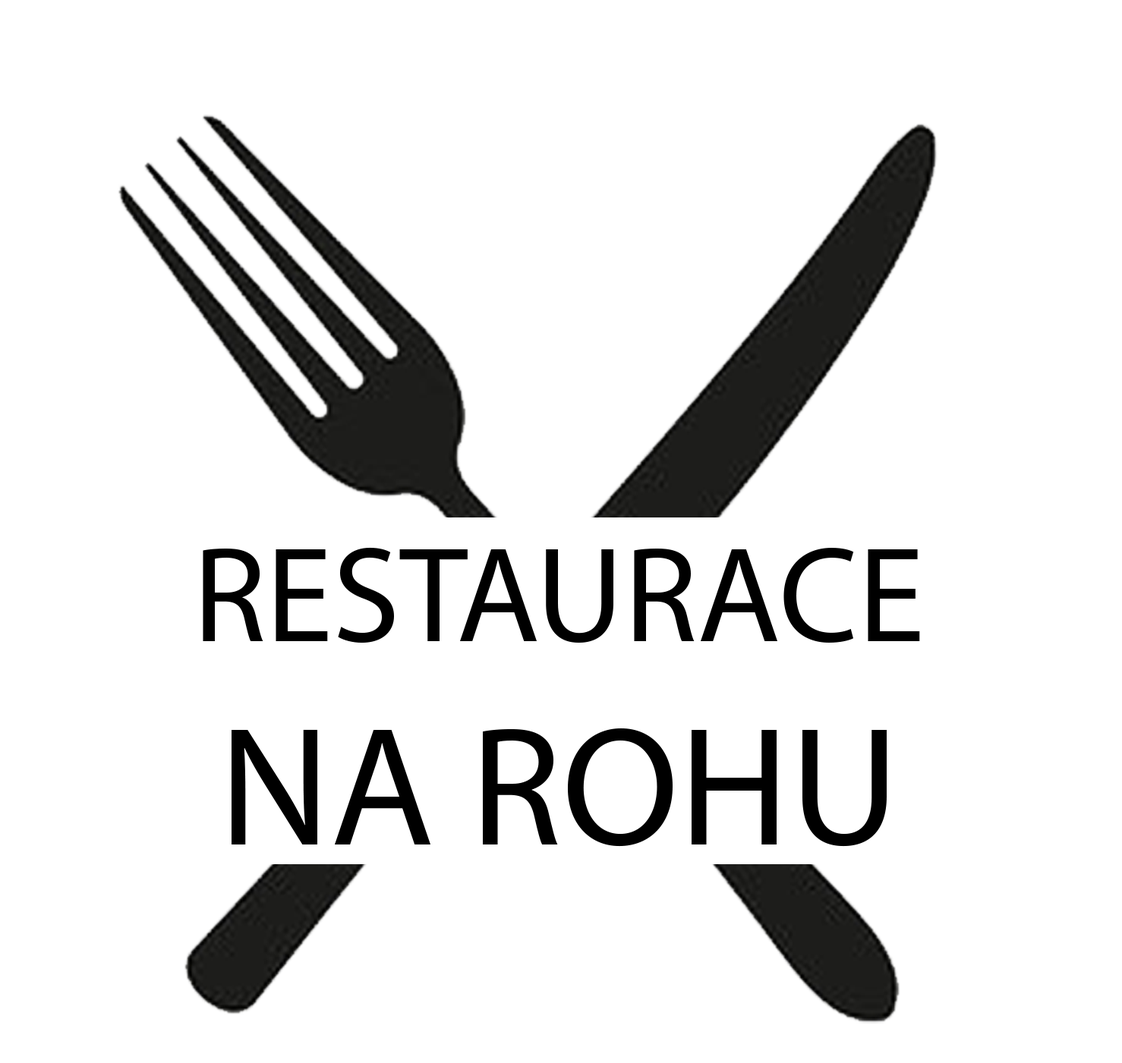
<style>
.page{position:relative;width:1122px;height:1063px;background:#ffffff}
.page>*{position:absolute;margin:0}
.t1{font:135.7px "MyriadPro-Regular";color:#000000}
.t2{font:169.7px "MyriadPro-Regular";color:#000000}
</style>
<div class="page">
<p class="t1" style="left:203px;top:547px;width:717px;height:300px;text-align:center">RESTAURACE<br><span class="t2">NA ROHU</span></p>
</div>
